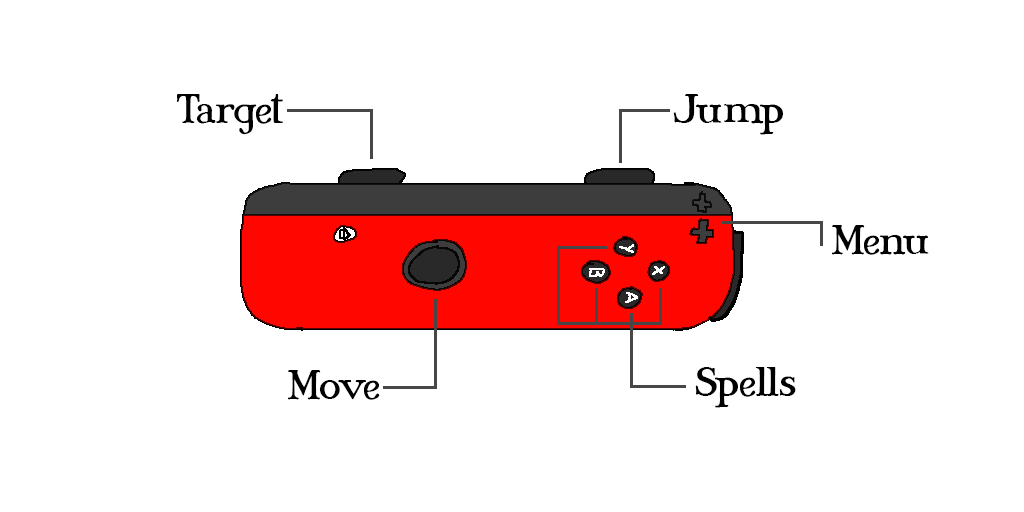
<style>
.page{position:relative;width:1024px;height:512px;background:#ffffff}
.page>*{position:absolute;margin:0}
.t1{font:36px "MaryJaneAntique";color:#000000}
</style>
<div class="page">
<p class="t1" style="left:176px;top:94px;width:107px;height:41px">Target</p>
<p class="t1" style="left:673px;top:94px;width:110px;height:41px">Jump</p>
<p class="t1" style="left:831px;top:225px;width:98px;height:30px">Menu</p>
<p class="t1" style="left:287px;top:370px;width:93px;height:30px">Move</p>
<p class="t1" style="left:695px;top:367px;width:101px;height:41px">Spells</p>
</div>
